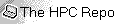
<style>
.page{position:relative;width:120px;height:24px;background:#ffffff}
.page>*{position:absolute;margin:0}
.t1{font:14px "MicrosoftSansSerif";color:#000000}
</style>
<div class="page">
<p class="t1" style="left:20px;top:7px;width:94px;height:13px">The HPC Repo</p>
</div>
